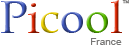
<style>
.page{position:relative;width:129px;height:45px;background:#ffffff}
.page>*{position:absolute;margin:0}
.t1{font:45.5px "BookAntiqua"}
.t2{font:4px "TimesNewRomanPSMT";color:#777675}
.t3{font:10.1px "ArialMT";color:#777675}
</style>
<div class="page">
<p class="t1" style="left:1px;top:0px;width:121px;height:33px">Picool</p>
<p class="t2" style="left:122px;top:0px;width:8px;height:4px">TM</p>
<p class="t3" style="left:91px;top:38px;width:31px;height:7px">France</p>
</div>
